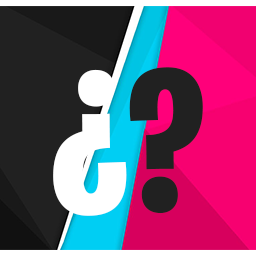
<style>
.page{position:relative;width:256px;height:256px;background:#212121}
.page>*{position:absolute;margin:0}
.t1{font:202.7px "BurbankBigCondensed-Bold";color:#ffffff}
.t2{font:202.7px "BurbankBigCondensed-Bold";color:#212121}
</style>
<div class="page">
<p class="t1" style="left:53px;top:69px;width:74px;height:147px;rotate:180deg">?</p>
<p class="t2" style="left:129px;top:67px;width:74px;height:147px">?</p>
</div>
